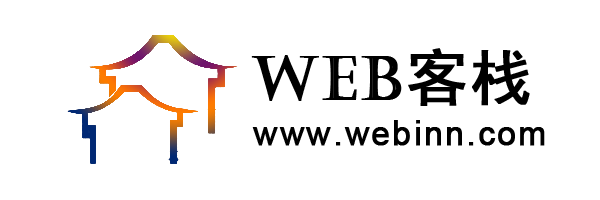
<style>
.page{position:relative;width:600px;height:200px;background:#ffffff}
.page>*{position:absolute;margin:0}
.t1{font:61.2px "Castellar";letter-spacing:0.05em;color:#000000;font-weight:bold}
.t2{font:61.2px "SimHei";letter-spacing:0.05em;color:#000000;font-weight:bold}
.t3{font:34px "ArialMT";letter-spacing:0.05em;color:#000000;font-weight:bold}
</style>
<div class="page">
<p class="t1" style="left:251px;top:48px;width:279px;height:58px">WEB<span class="t2">客栈</span></p>
<p class="t3" style="left:252px;top:120px;width:293px;height:26px">www.webinn.com</p>
</div>
